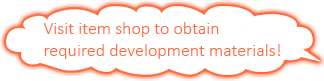
<style>
.page{position:relative;width:324px;height:81px;background:#ffffff}
.page>*{position:absolute;margin:0}
.t1{font:18px "Calibri-Light";color:#ff6b43}
</style>
<div class="page">
<p class="t1" style="left:43px;top:22px;width:237px;height:37px">Visit item shop to obtain<br>required development materials!</p>
</div>
